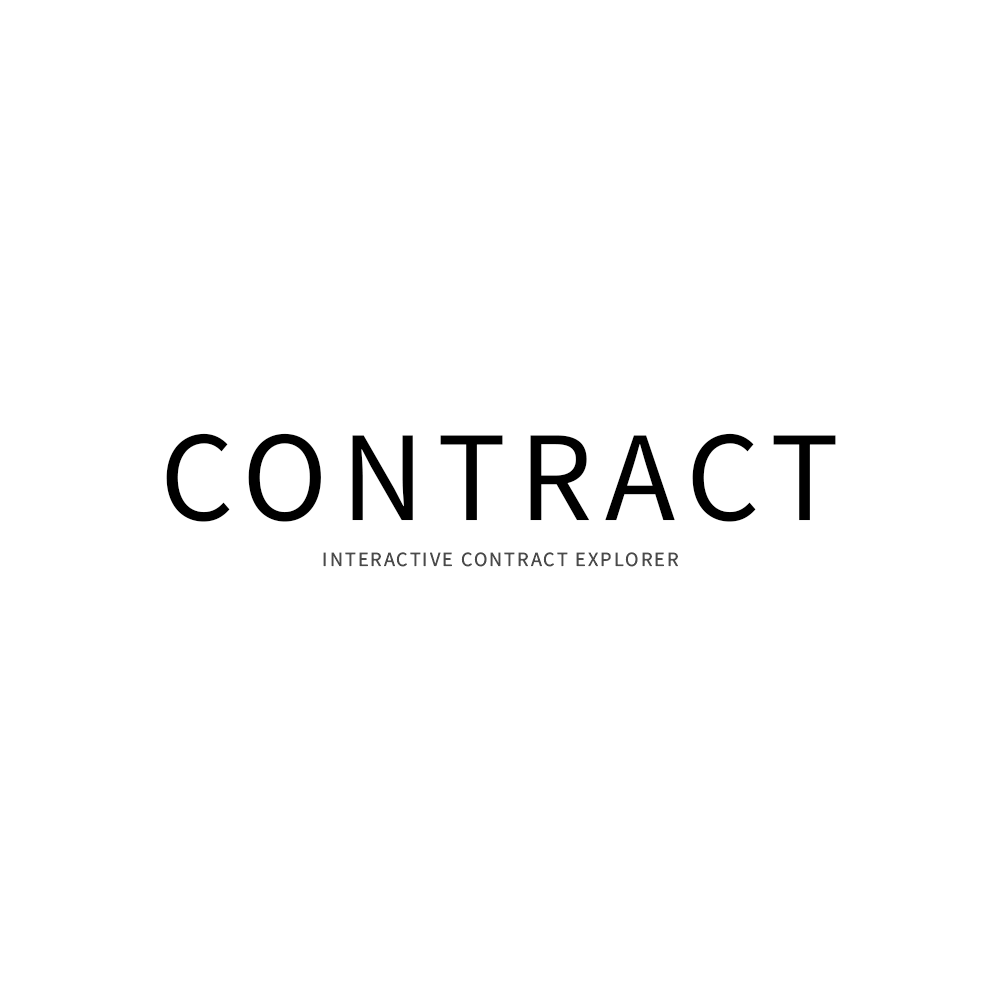
<style>
.page{position:relative;width:1000px;height:1000px;background:#ffffff}
.page>*{position:absolute;margin:0}
.t1{font:128.8px "SourceSansRoman-Regular";letter-spacing:0.1em;color:#000000;font-weight:bold}
.t2{font:20.2px "SourceSansRoman-Regular";letter-spacing:0.1em;color:#4b4b4b;font-weight:bold}
</style>
<div class="page">
<p class="t1" style="left:166px;top:433px;width:670px;height:89px">CONTRACT</p>
<p class="t2" style="left:323px;top:552px;width:355px;height:15px">INTERACTIVE CONTRACT EXPLORER</p>
</div>
